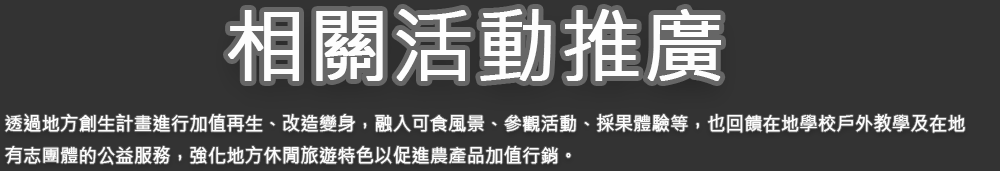
<style>
.page{position:relative;width:1000px;height:171px;background:#333333}
.page>*{position:absolute;margin:0}
.t1{font:81.5px "MicrosoftJhengHeiRegular";color:#fdfdfd;font-weight:bold}
.t2{font:18px "MicrosoftJhengHeiRegular";color:#fdfdfd;font-weight:bold}
</style>
<div class="page">
<p class="t1" style="left:228px;top:9px;width:493px;height:72px">相關活動推廣</p>
<p class="t2" style="left:5px;top:114px;width:960px;height:51px">透過地方創生計畫進行加值再生、改造變身，融入可食風景、參觀活動、採果體驗等，也回饋在地學校戶外教學及在地<br>有志團體的公益服務，強化地方休閒旅遊特色以促進農產品加值行銷。</p>
</div>
